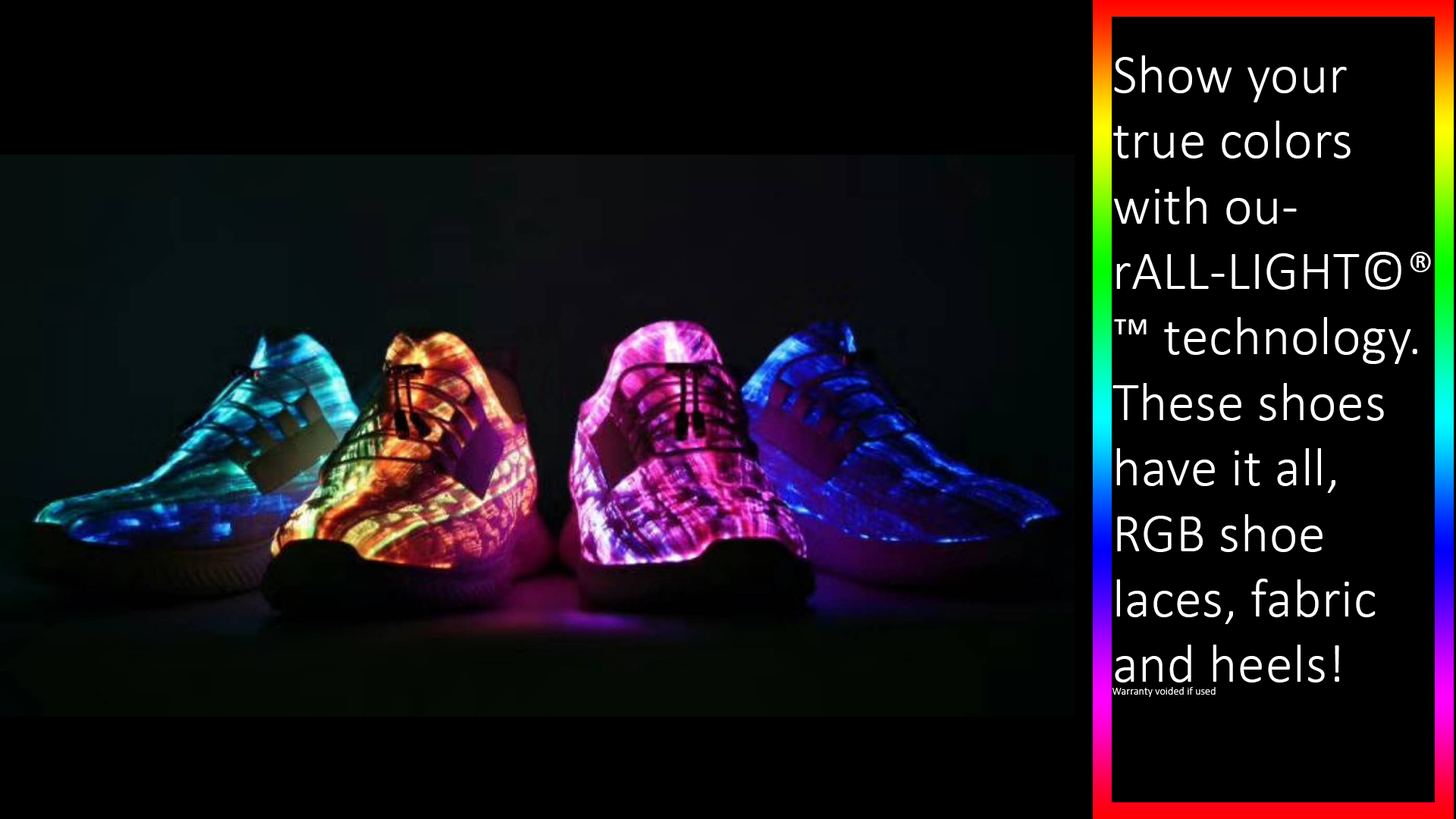
<style>
.page{position:relative;width:1456px;height:819px;background:#000000}
.page>*{position:absolute;margin:0}
.t1{font:54.6px "Calibri-Light";letter-spacing:0.01em;color:#fefefe}
.t2{font:10.6px "Calibri-Light";letter-spacing:0.01em;color:#fefefe}
</style>
<div class="page">
<p class="t1" style="left:1112px;top:55px;width:319px;height:642px">Show your true colors with ourALL-LIGHT©®™ technology. These shoes have it all, RGB shoe laces, fabric and heels! <br><span class="t2">Warranty voided if used</span></p>
</div>
